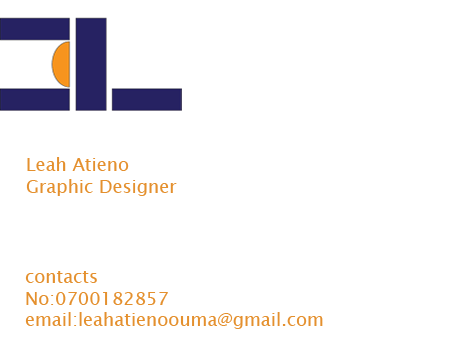
<style>
.page{position:relative;width:450px;height:350px;background:#ffffff}
.page>*{position:absolute;margin:0}
.t1{font:18px "LucidaSansUnicode";color:#e4902e}
</style>
<div class="page">
<p class="t1" style="left:26px;top:157px;width:151px;height:39px">Leah Atieno<br>Graphic Designer</p>
<p class="t1" style="left:25px;top:271px;width:298px;height:58px">contacts<br>No:0700182857<br>email:leahatienoouma@gmail.com</p>
</div>
